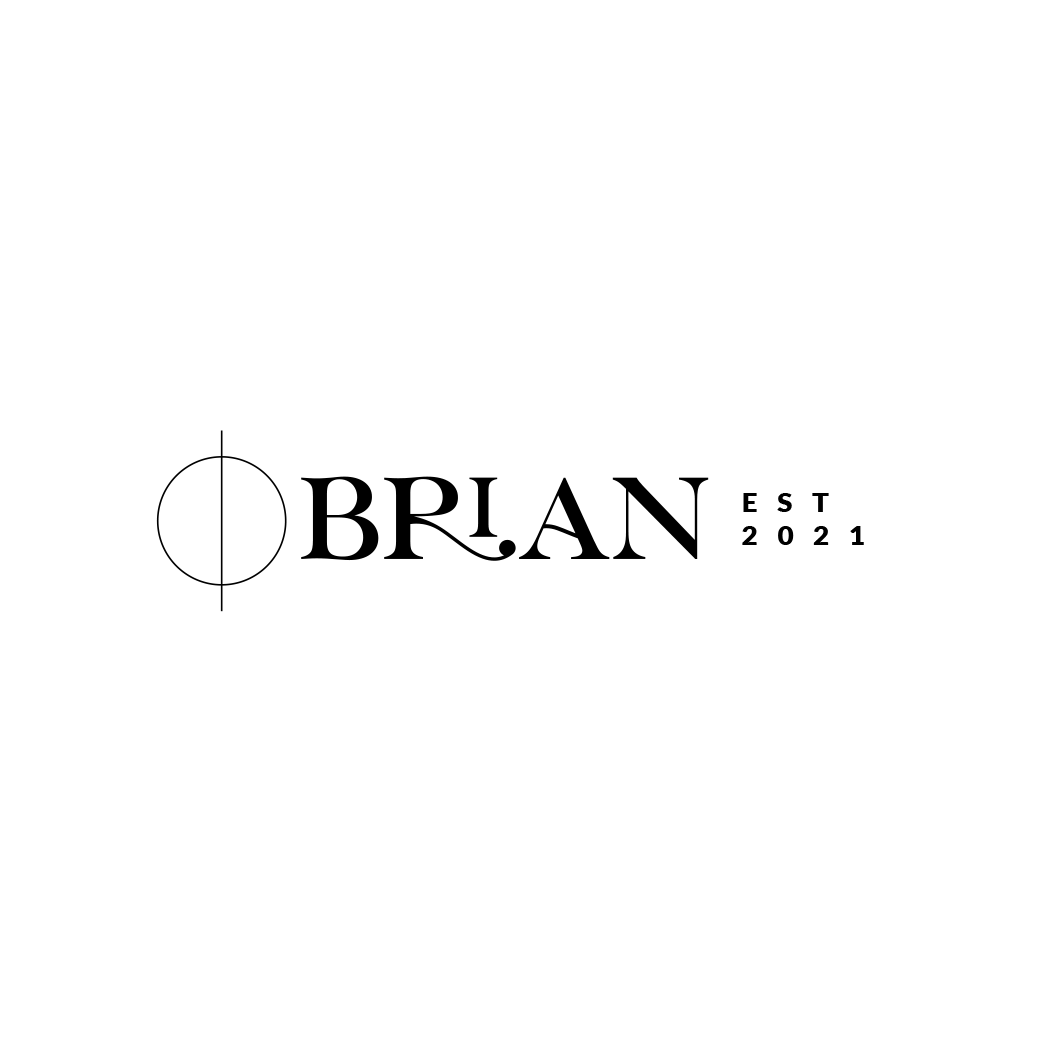
<style>
.page{position:relative;width:1042px;height:1042px;background:#ffffff}
.page>*{position:absolute;margin:0}
.t1{font:116.4px "LorettoRegular";color:#000000;text-transform:uppercase}
.t2{font:27.3px "Lato-Black";letter-spacing:0.7em;color:#000000;text-transform:uppercase}
</style>
<div class="page">
<p class="t1" style="left:301px;top:476px;width:408px;height:85px">BRIAN</p>
<p class="t2" style="left:742px;top:493px;width:122px;height:52px">EST<br>2021</p>
</div>
